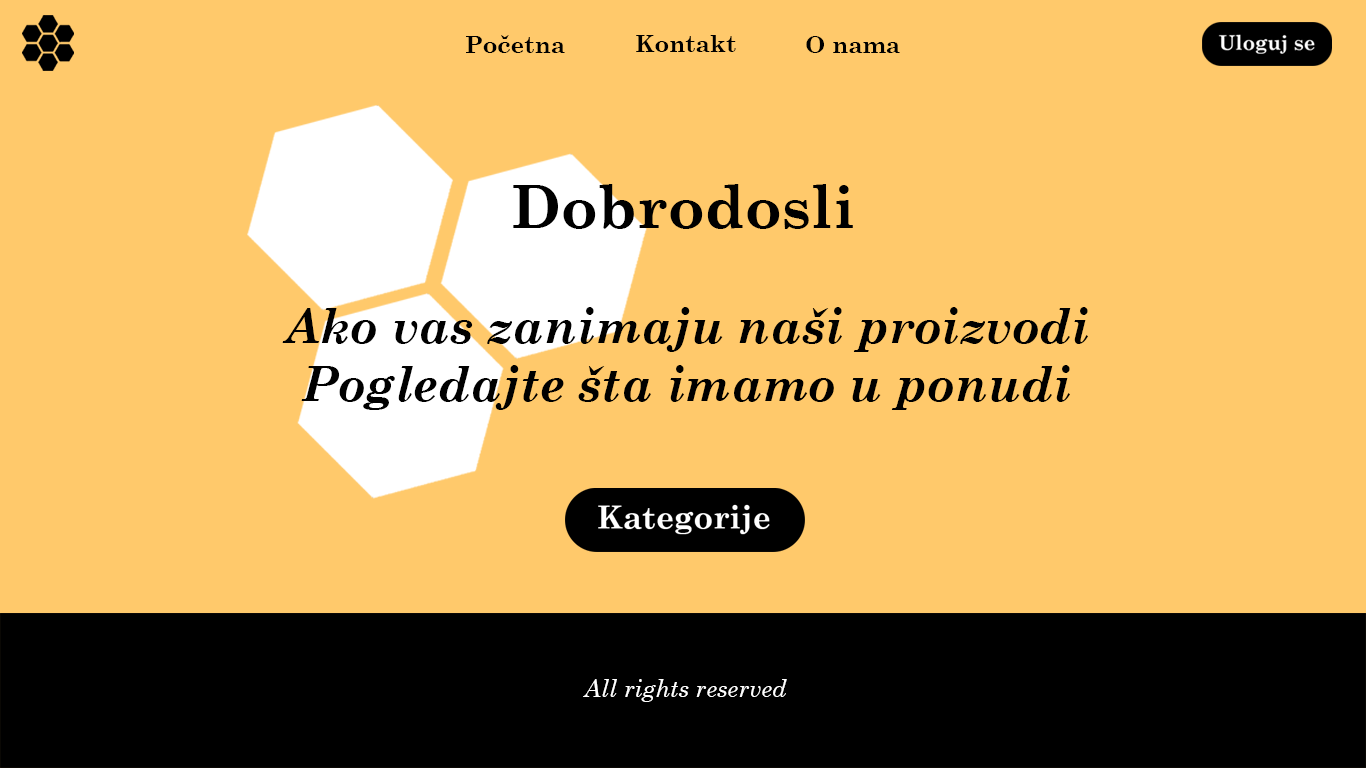
<style>
.page{position:relative;width:1366px;height:768px;background:#ffc96b}
.page>*{position:absolute;margin:0}
.t1{font:24px "CenturySchoolbook-Bold";color:#000000}
.t2{font:60px "CenturySchoolbook-Bold";color:#000000}
.t3{font:48px "CenturySchoolbook-BoldItalic";color:#000000}
.t4{font:24px "CenturySchoolbook-Italic";color:#ffffff}
</style>
<div class="page">
<p class="t1" style="left:466px;top:35px;width:99px;height:18px">Početna</p>
<p class="t1" style="left:636px;top:35px;width:100px;height:17px">Kontakt</p>
<p class="t1" style="left:806px;top:36px;width:94px;height:17px">O nama</p>
<p class="t2" style="left:513px;top:184px;width:340px;height:45px">Dobrodosli</p>
<p class="t3" style="left:282px;top:307px;width:806px;height:103px;text-align:center">Ako vas zanimaju naši proizvodi<br>Pogledajte šta imamo u ponudi</p>
<p class="t4" style="left:583px;top:679px;width:204px;height:23px">All rights reserved</p>
</div>
